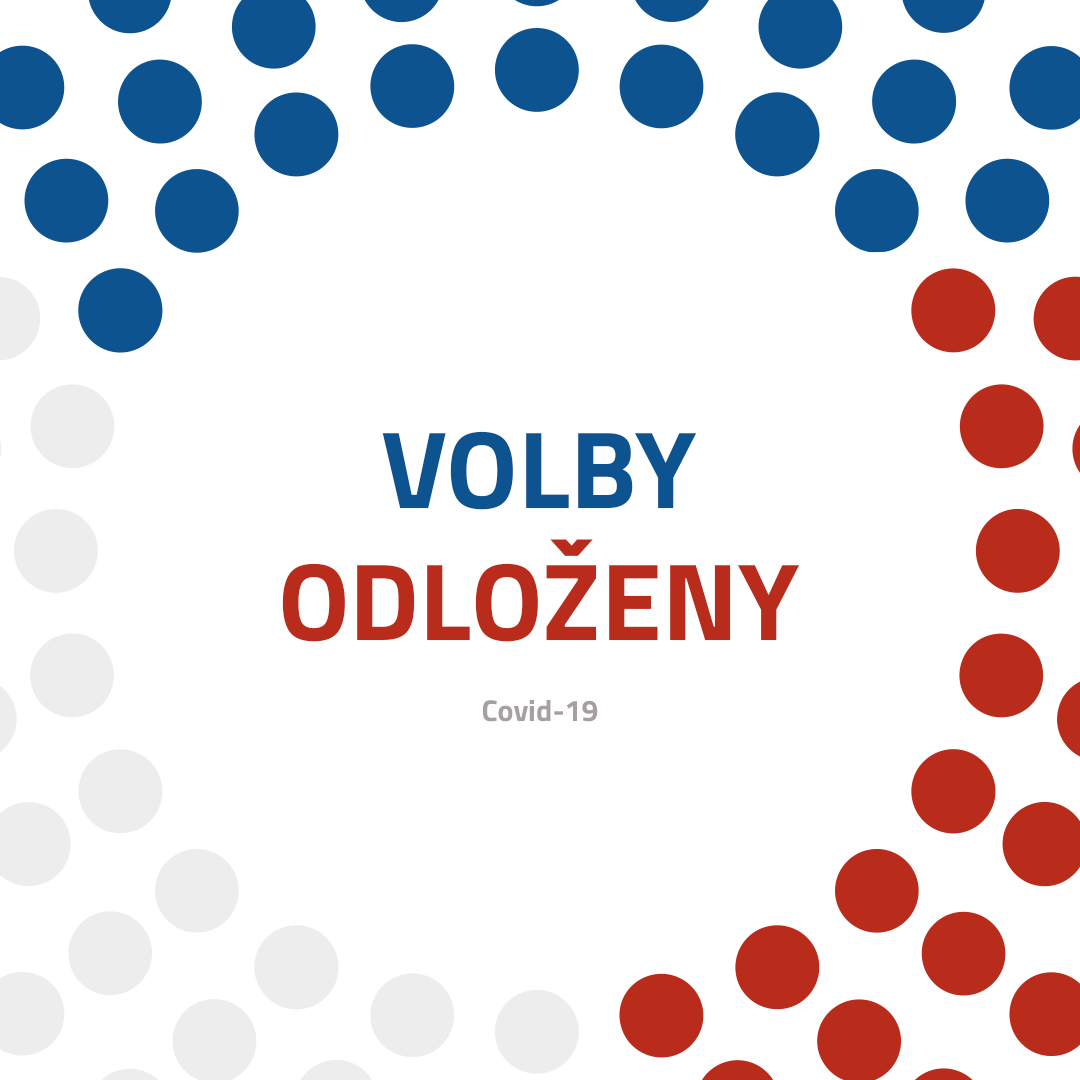
<style>
.page{position:relative;width:1080px;height:1080px;background:#ffffff}
.page>*{position:absolute;margin:0}
.t1{font:110px "TitilliumWeb-Bold";color:#b92b1a;text-transform:uppercase}
.t2{font:110px "TitilliumWeb-Bold";color:#0c5390;text-transform:uppercase}
.t3{font:30px "TitilliumWeb-Bold";color:#a8a0a0}
</style>
<div class="page">
<p class="t1" style="left:282px;top:431px;width:518px;height:211px;text-align:center"><span class="t2">volby<br></span>odloženy</p>
<p class="t3" style="left:483px;top:700px;width:115px;height:22px">Covid-19</p>
</div>
